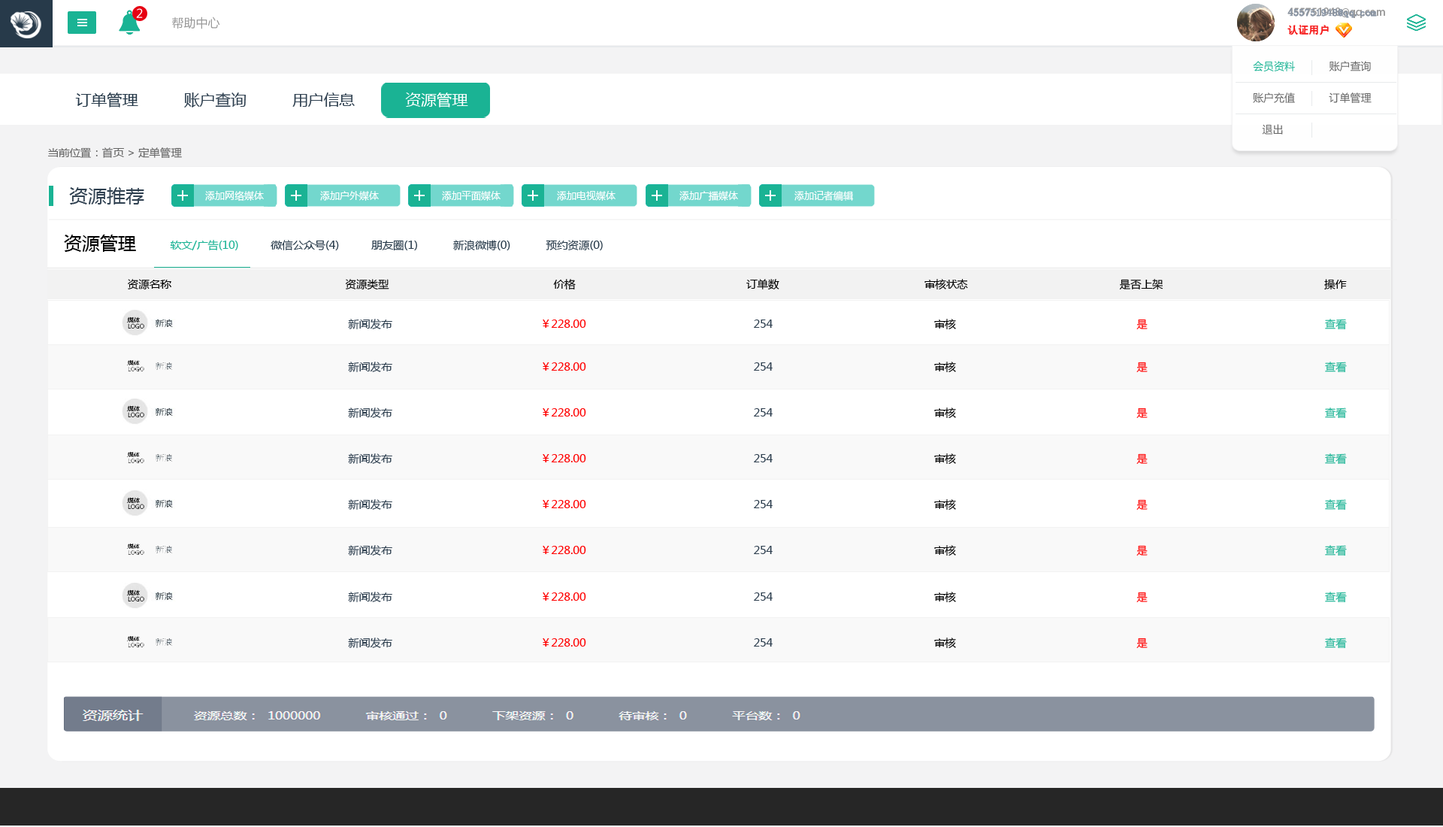
<style>
.page{position:relative;width:1443px;height:827px;background:#ffffff}
.page>*{position:absolute;margin:0}
.t1{font:12px "MicrosoftYaHei";color:#ffffff}
.t2{font:12px "MicrosoftYaHei";color:#999999}
.t3{font:10.5px/18px "AdobeHeitiStd-Regular";color:#999999}
.t4{font:10.5px/18px "AdobeHeitiStd-Regular";color:#f61e1e}
.t5{font:10.5px/18px "AdobeHeitiStd-Regular";color:#ffffff}
.t6{font:10.5px/18px "SimSun";color:#8894a4;font-weight:bold}
.t7{font:10.5px/18px "SimSun";color:#f61e1e}
.t8{font:10.5px/31.6px "MicrosoftYaHei";color:#666666}
.t9{font:10.5px/31.6px "MicrosoftYaHei";color:#1ab394}
.t10{font:15px "MicrosoftYaHei";color:#2f4050;scale:1.04 1}
.t11{font:15px "MicrosoftYaHei";color:#273a4a;scale:1.04 1}
.t12{font:15px "MicrosoftYaHei";color:#ffffff;scale:1.04 1}
.t13{font:10.5px "MicrosoftYaHei";color:#666666;scale:1.04 1}
.t14{font:18px "MicrosoftYaHei";color:#2f4050;scale:1.04 1}
.t15{font:9.8px "MicrosoftYaHei";color:#ffffff}
.t16{font:18px "MicrosoftYaHei";color:#000000}
.t17{font:10.5px "MicrosoftYaHei";color:#273a4a;scale:1.04 1}
.t18{font:10.5px "MicrosoftYaHei";color:#2f4050;scale:1.04 1}
.t19{font:10.5px "MicrosoftYaHei";color:#1ab394;scale:1.04 1}
.t20{font:10.5px "MicrosoftYaHei";color:#000000;scale:1.04 1}
.t21{font:10.5px "MicrosoftYaHei";color:#ff0000;scale:1.04 1}
</style>
<div class="page">
<p class="t1" style="left:136px;top:8px;width:7px;height:10px">2</p>
<p class="t2" style="left:172px;top:17px;width:48px;height:12px">帮助中心</p>
<p class="t3" style="left:1287px;top:8px;width:98px;height:27px">455751948@qq.com<br><span class="t4">认证用户               </span><span class="t5">退出</span></p>
<p class="t6" style="left:1287px;top:8px;width:90px;height:27px">455751948@qq.com<br><span class="t7">认证用户</span></p>
<p class="t8" style="left:1253px;top:61px;width:118px;height:74px"><span class="t9">会员资料</span>           账户查询<br>账户充值           订单管理           <br>   退出</p>
<p class="t10" style="left:75px;top:92px;width:393px;height:15px"><span class="t11">订单管理          </span>账户查询          用户信息           <span class="t12">资源管理</span></p>
<p class="t13" style="left:48px;top:147px;width:134px;height:11px">当前位置：首页 &gt; 定单管理</p>
<p class="t14" style="left:69px;top:187px;width:75px;height:17px">资源推荐</p>
<p class="t15" style="left:205px;top:191px;width:59px;height:10px">添加网络媒体</p>
<p class="t15" style="left:320px;top:191px;width:59px;height:10px">添加户外媒体</p>
<p class="t15" style="left:442px;top:191px;width:58px;height:10px">添加平面媒体</p>
<p class="t15" style="left:557px;top:191px;width:58px;height:10px">添加电视媒体</p>
<p class="t15" style="left:679px;top:191px;width:59px;height:10px">添加广播媒体</p>
<p class="t15" style="left:794px;top:191px;width:60px;height:10px">添加记者编辑</p>
<p class="t16" style="left:64px;top:234px;width:72px;height:18px">资源管理</p>
<p class="t17" style="left:170px;top:240px;width:433px;height:11px"><span class="t18"> </span><span class="t19">软文/广告(10)          </span>微信公众号(4)          朋友圈(1)           新浪微博(0)           预约资源(0)</p>
<p class="t20" style="left:128px;top:279px;width:1219px;height:10px">资源名称                                                      资源类型                                                   价格                                                     订单数                                             审核状态                                               是否上架                                                  操作</p>
<p class="t21" style="left:348px;top:319px;width:999px;height:10px"><span class="t18">新闻发布                                              </span>￥228.00                                                   <span class="t18"> 254     </span><span class="t20">                                             审核                                                        </span>是                                                       <span class="t19">查看</span></p>
<p class="t21" style="left:348px;top:361px;width:999px;height:11px"><span class="t18">新闻发布                                              </span>￥228.00                                                   <span class="t18"> 254     </span><span class="t20">                                             审核                                                        </span>是                                                       <span class="t19">查看</span></p>
<p class="t21" style="left:348px;top:407px;width:999px;height:11px"><span class="t18">新闻发布                                              </span>￥228.00                                                   <span class="t18"> 254     </span><span class="t20">                                             审核                                                        </span>是                                                       <span class="t19">查看</span></p>
<p class="t21" style="left:348px;top:453px;width:999px;height:11px"><span class="t18">新闻发布                                              </span>￥228.00                                                   <span class="t18"> 254     </span><span class="t20">                                             审核                                                        </span>是                                                       <span class="t19">查看</span></p>
<p class="t21" style="left:348px;top:499px;width:999px;height:10px"><span class="t18">新闻发布                                              </span>￥228.00                                                   <span class="t18"> 254     </span><span class="t20">                                             审核                                                        </span>是                                                       <span class="t19">查看</span></p>
<p class="t21" style="left:348px;top:545px;width:999px;height:10px"><span class="t18">新闻发布                                              </span>￥228.00                                                   <span class="t18"> 254     </span><span class="t20">                                             审核                                                        </span>是                                                       <span class="t19">查看</span></p>
<p class="t21" style="left:348px;top:591px;width:999px;height:11px"><span class="t18">新闻发布                                              </span>￥228.00                                                   <span class="t18"> 254     </span><span class="t20">                                             审核                                                        </span>是                                                       <span class="t19">查看</span></p>
<p class="t21" style="left:348px;top:637px;width:999px;height:11px"><span class="t18">新闻发布                                              </span>￥228.00                                                   <span class="t18"> 254     </span><span class="t20">                                             审核                                                        </span>是                                                       <span class="t19">查看</span></p>
</div>
